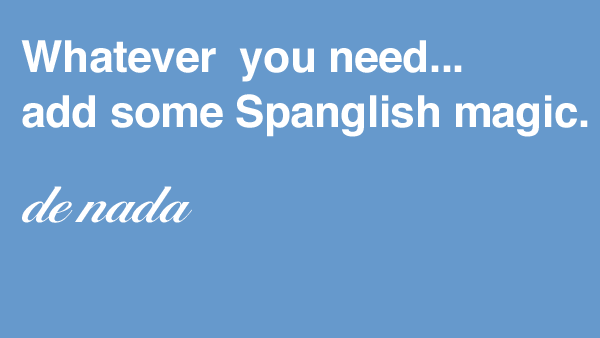
<style>
.page{position:relative;width:600px;height:338px;background:#6699cc}
.page>*{position:absolute;margin:0}
.t1{font:44px/55px "Helvetica-Bold";letter-spacing:-0.01em;color:#ffffff}
.t2{font:60px "BallantinesScrEFCE-DemBol";letter-spacing:-0.025em;color:#ffffff}
</style>
<div class="page">
<p class="t1" style="left:21px;top:40px;width:567px;height:97px">Whatever  you need...<br>add some Spanglish magic.</p>
<p class="t2" style="left:22px;top:186px;width:170px;height:37px">de nada</p>
</div>
